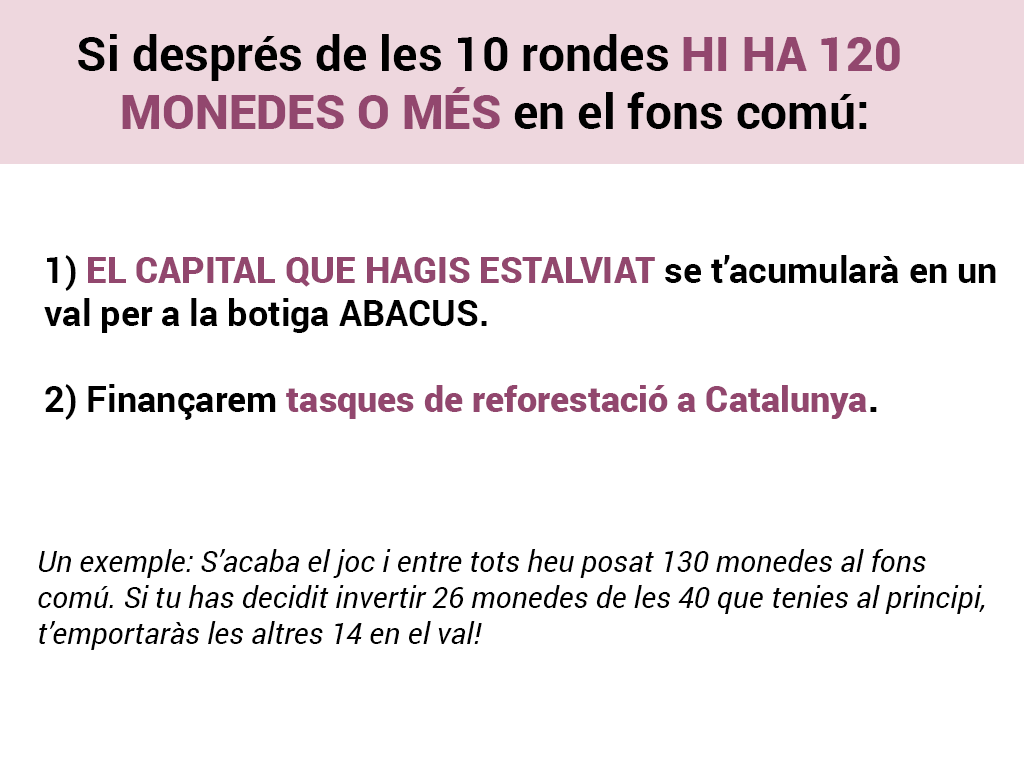
<style>
.page{position:relative;width:1024px;height:768px;background:#ffffff}
.page>*{position:absolute;margin:0}
.t1{font:48px "Roboto-Bold";color:#000000}
.t2{font:48px "Roboto-Black";color:#92476e}
.t3{font:36px "Roboto-Bold";color:#000000}
.t4{font:36px "Roboto-Black";color:#92476e}
.t5{font:36px "Roboto-Black";color:#000000}
.t6{font:30px "Roboto-Italic";color:#000000}
</style>
<div class="page">
<p class="t1" style="left:78px;top:34px;width:822px;height:95px;text-align:center">Si després de les 10 rondes <span class="t2">HI HA 120 <br>MONEDES O MÉS </span>en el fons comú:</p>
<p class="t3" style="left:44px;top:255px;width:952px;height:165px">1) <span class="t4">EL CAPITAL QUE HAGIS ESTALVIAT </span>se t’acumularà en un <br>val per a la botiga ABACUS.<br><br>2) Finançarem <span class="t4">tasques de reforestació a Catalunya</span><span class="t5">.</span></p>
<p class="t6" style="left:38px;top:549px;width:947px;height:101px">Un exemple: S’acaba el joc i entre tots heu posat 130 monedes al fons <br>comú. Si tu has decidit invertir 26 monedes de les 40 que tenies al principi,<br>t’emportaràs les altres 14 en el val!</p>
</div>
